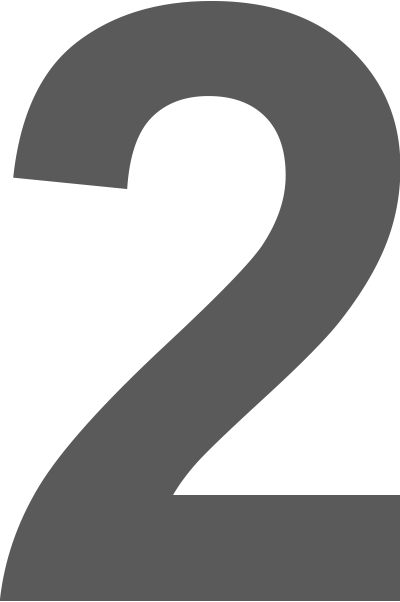
<style>
.page{position:relative;width:400px;height:602px;background:#5a5a5a}
.page>*{position:absolute;margin:0}
.t1{font:833.3px "Arial-BoldMT";letter-spacing:0.04em;color:#5a5a5a}
</style>
<div class="page">
<p class="t1" style="left:0px;top:1px;width:401px;height:600px">2</p>
</div>
